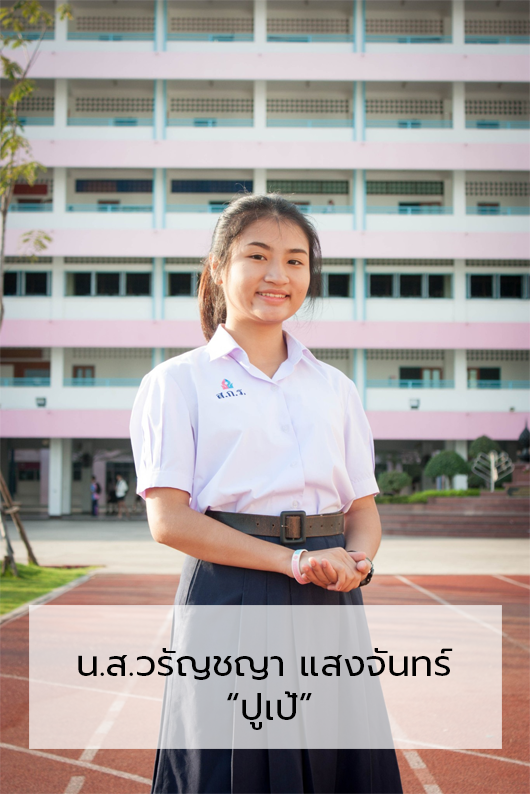
<style>
.page{position:relative;width:530px;height:794px}
.page>*{position:absolute;margin:0}
.t1{font:36.7px "Prompt-Regular";color:#000000}
</style>
<div class="page">
<p class="t1" style="left:78px;top:648px;width:375px;height:82px">น.ส.วรัญชญา แสงจันทร์<br>           “ปูเป้”</p>
</div>
